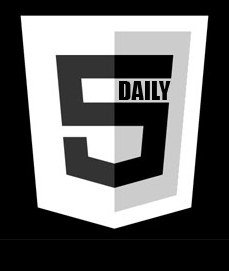
<style>
.page{position:relative;width:229px;height:271px;background:#000000}
.page>*{position:absolute;margin:0}
.t1{font:24.4px "Impact";color:#000000}
</style>
<div class="page">
<p class="t1" style="left:119px;top:81px;width:52px;height:19px">DAILY</p>
</div>
